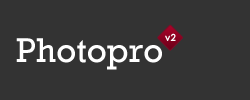
<style>
.page{position:relative;width:250px;height:100px;background:#333333}
.page>*{position:absolute;margin:0}
.t1{font:35px "Rockwell";color:#ffffff}
.t2{font:10px "CenturyGothic-Bold";color:#ffffff}
</style>
<div class="page">
<p class="t1" style="left:16px;top:38px;width:146px;height:32px">Photopro</p>
<p class="t2" style="left:165px;top:33px;width:11px;height:8px">v2</p>
</div>
